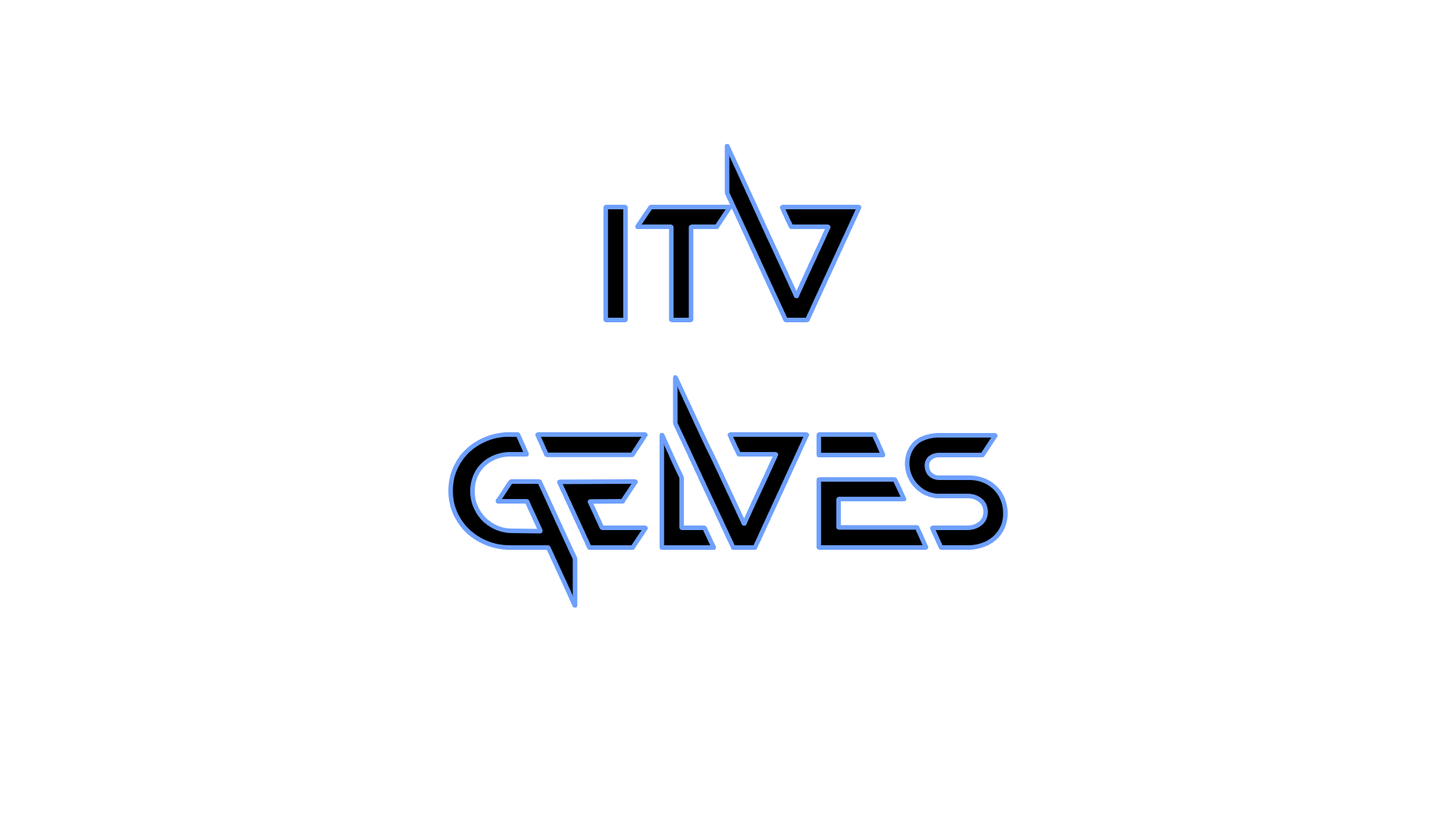
<style>
.page{position:relative;width:1456px;height:819px;background:#ffffff}
.page>*{position:absolute;margin:0}
.t1{font:189.6px "NewtonHowardFont-Regular";color:#000000}
</style>
<div class="page">
<p class="t1" style="left:450px;top:146px;width:556px;height:460px;text-align:center">itv <br>Gelves</p>
</div>
